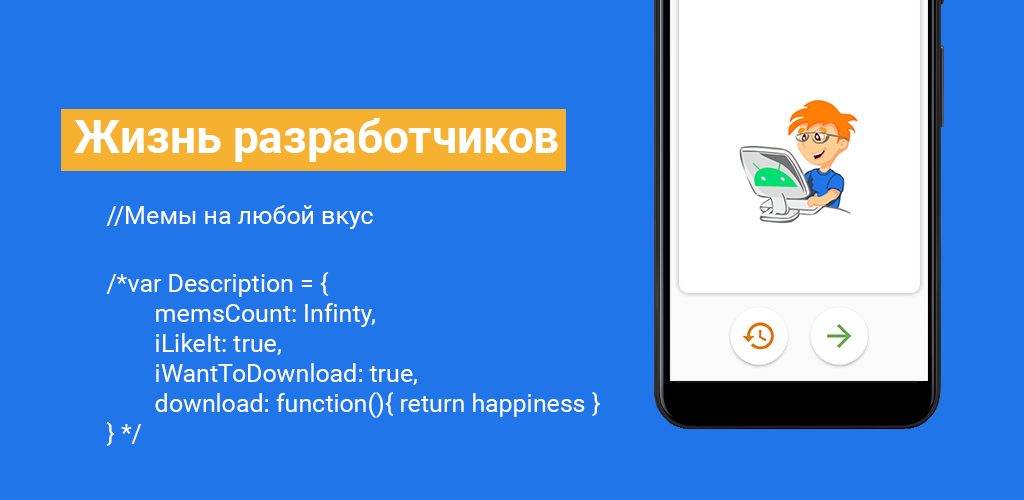
<style>
.page{position:relative;width:1024px;height:500px;background:#2076e8}
.page>*{position:absolute;margin:0}
.t1{font:45.8px "Roboto-Bold";color:#ffffff}
.t2{font:25px "Roboto-Regular";color:#ffffff}
</style>
<div class="page">
<p class="t1" style="left:74px;top:118px;width:484px;height:44px">Жизнь разработчиков</p>
<p class="t2" style="left:106px;top:205px;width:267px;height:24px">//Мемы на любой вкус</p>
<p class="t2" style="left:106px;top:272px;width:494px;height:174px">/*var Description = {<br>   memsCount: Infinty,<br>   iLikeIt: true,<br>   iWantToDownload: true,<br>   download: function(){ return happiness }<br>} */</p>
</div>
